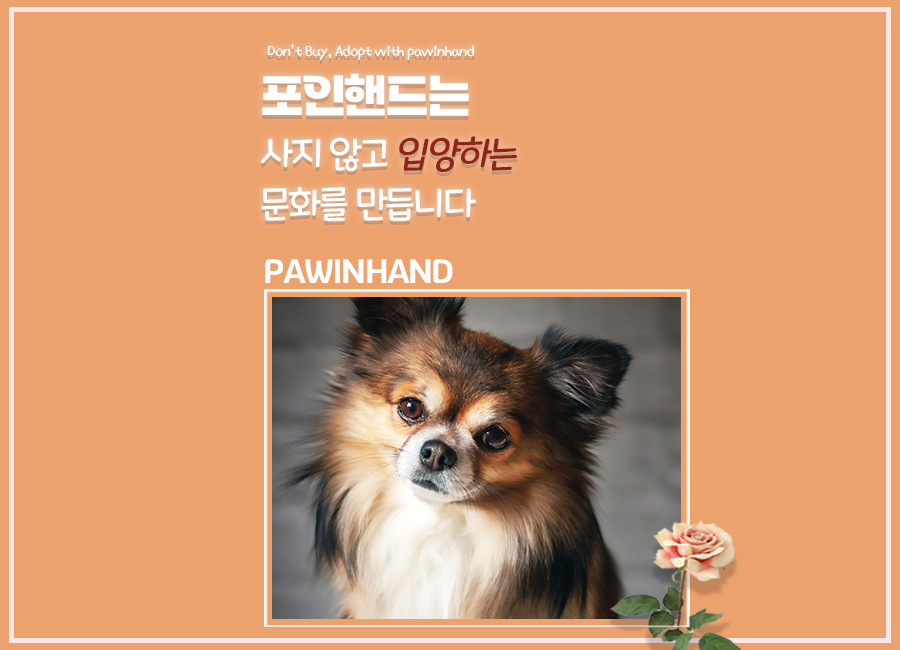
<style>
.page{position:relative;width:900px;height:650px;background:#eca26d}
.page>*{position:absolute;margin:0}
.t1{font:16px "KNPSBandali-Regular";letter-spacing:-0.05em;color:#ffffff}
.t2{font:37px/50px "MaplestoryLight";letter-spacing:-0.05em;color:#ffffff}
.t3{font:50px/50px "Tenada";letter-spacing:-0.05em;color:#ffffff}
.t4{font:37px/50px "MaplestoryLight";letter-spacing:-0.05em;color:#92221c;font-style:italic}
.t5{font:33.3px "GyeonggiTitleVOTF";letter-spacing:-0.05em;color:#ffffff}
</style>
<div class="page">
<p class="t1" style="left:267px;top:44px;width:207px;height:16px">Don’t Buy, Adopt with pawinhand</p>
<p class="t2" style="left:261px;top:73px;width:256px;height:148px"><span class="t3">포인핸드는<br></span>사지 않고 <span class="t4">입양하는<br></span>문화를 만듭니다</p>
<p class="t5" style="left:265px;top:259px;width:188px;height:24px">PAWINHAND</p>
</div>
